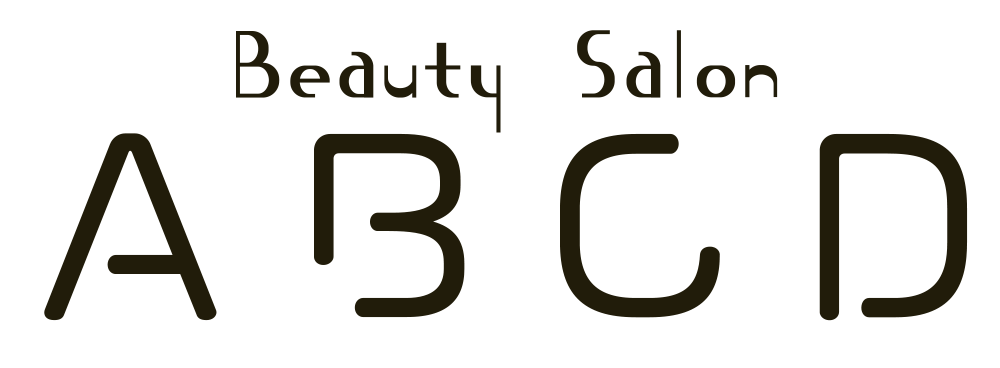
<style>
.page{position:relative;width:1000px;height:368px;background:#ffffff}
.page>*{position:absolute;margin:0}
.t1{font:128.4px "AB-andante";color:#211c0a}
.t2{font:224.7px "VDL-MegaMaru-Regular";color:#211c0a}
</style>
<div class="page">
<p class="t1" style="left:236px;top:30px;width:542px;height:103px">Beauty Salon</p>
<p class="t2" style="left:44px;top:133px;width:924px;height:188px">A B C D</p>
</div>
